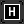
<style>
.page{position:relative;width:24px;height:24px;background:#333333}
.page>*{position:absolute;margin:0}
.t1{font:12.6px "IBMPlexMono-Medium";color:#ffffff;scale:1.06 1}
</style>
<div class="page">
<p class="t1" style="left:9px;top:7px;width:6px;height:9px">H</p>
</div>
